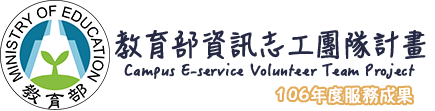
<style>
.page{position:relative;width:435px;height:111px;background:#ffffff}
.page>*{position:absolute;margin:0}
.t1{font:27.1px "HanziPenTC-W5";color:#252843;font-weight:bold}
.t2{font:15.4px "HanziPenTC-W5";color:#252843;font-weight:bold}
.t3{font:16.7px "HannotateTC-W7";color:#ffffff;font-weight:bold}
</style>
<div class="page">
<p class="t1" style="left:115px;top:30px;width:311px;height:29px">教育部資訊志工團隊計畫</p>
<p class="t2" style="left:124px;top:63px;width:291px;height:16px">Campus E-service Volunteer Team Project</p>
<p class="t3" style="left:277px;top:87px;width:135px;height:17px">106年度服務成果</p>
</div>
